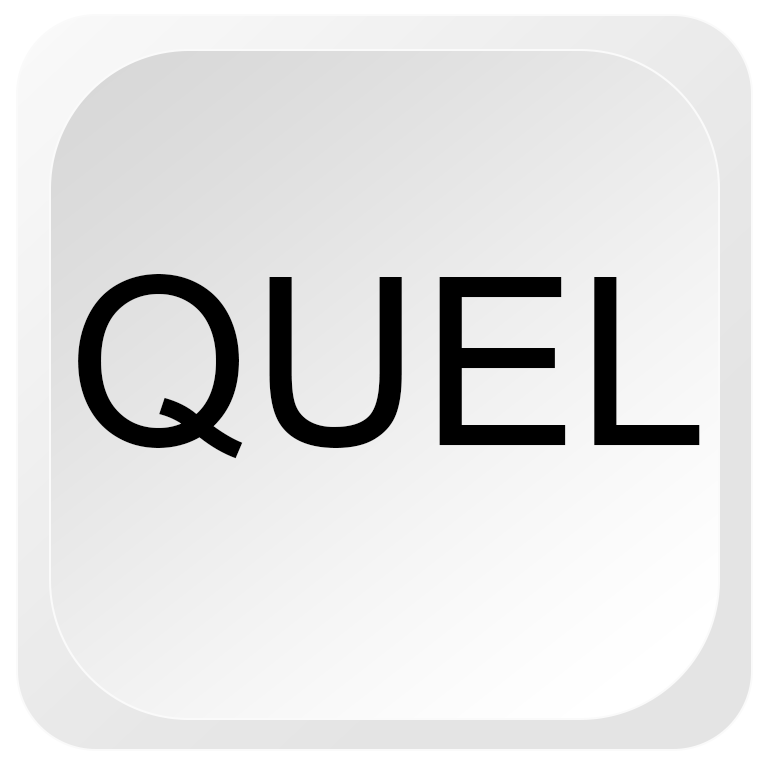
<style>
.page{position:relative;width:768px;height:768px}
.page>*{position:absolute;margin:0}
.t1{font:235px "ArialMT";color:#000000}
</style>
<div class="page">
<p class="t1" style="left:78px;top:274px;width:622px;height:185px">QUEL</p>
</div>
